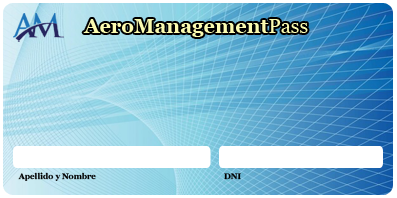
<style>
.page{position:relative;width:397px;height:198px}
.page>*{position:absolute;margin:0}
.t1{font:20px "Georgia-Bold";color:#fbfbb0}
.t2{font:20px "Georgia";color:#fbfbb0}
.t3{font:8px "Georgia-Bold";color:#000000}
</style>
<div class="page">
<p class="t1" style="left:83px;top:19px;width:225px;height:18px">AeroManagement<span class="t2">Pass</span></p>
<p class="t3" style="left:18px;top:172px;width:78px;height:9px">Apellido y Nombre</p>
<p class="t3" style="left:224px;top:173px;width:17px;height:7px">DNI</p>
</div>
